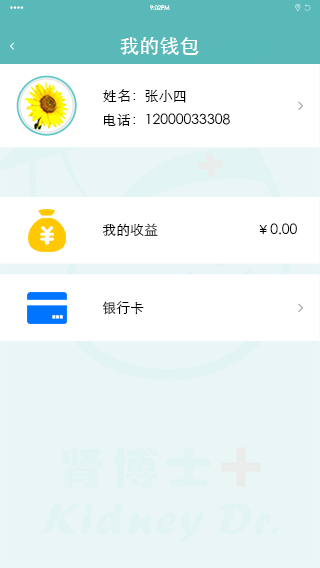
<style>
.page{position:relative;width:320px;height:568px;background:#eaf6f6}
.page>*{position:absolute;margin:0}
.t1{font:5.7px "STHeitiSC-Light";color:#ffffff}
.t2{font:20px "STHeitiSC-Medium";color:#ffffff}
.t3{font:14px "STHeitiSC-Light";color:#000000}
</style>
<div class="page">
<p class="t1" style="left:150px;top:5px;width:20px;height:5px">9:02PM</p>
<p class="t2" style="left:120px;top:37px;width:79px;height:18px">我的钱包</p>
<p class="t3" style="left:103px;top:89px;width:127px;height:37px">姓名：张小四<br>电话：12000033308</p>
<p class="t3" style="left:102px;top:223px;width:195px;height:13px">我的收益                            ￥0.00</p>
<p class="t3" style="left:102px;top:301px;width:42px;height:14px">银行卡</p>
</div>
